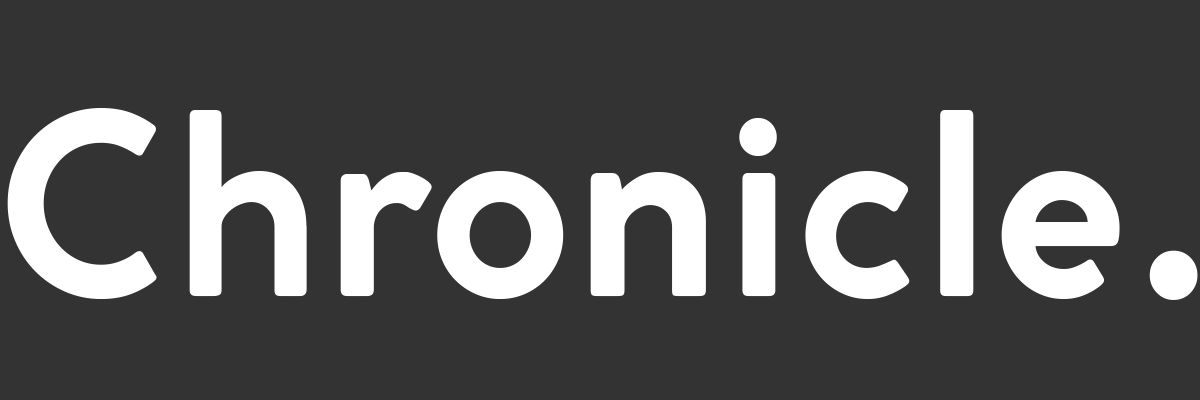
<style>
.page{position:relative;width:1200px;height:400px;background:#333333}
.page>*{position:absolute;margin:0}
.t1{font:249.7px "CocoGothic-Bold";letter-spacing:0.005em;color:#ffffff}
.t2{font:303.8px "CocoGothic-Bold";letter-spacing:0.005em;color:#ffffff}
</style>
<div class="page">
<p class="t1" style="left:7px;top:108px;width:1191px;height:192px">Chronicle<span class="t2">.</span></p>
</div>
